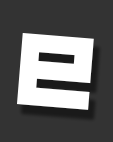
<style>
.page{position:relative;width:113px;height:142px;background:#333333}
.page>*{position:absolute;margin:0}
.t1{font:182.5px "tama-mini02";color:#ffffff}
</style>
<div class="page">
<p class="t1" style="left:17px;top:33px;width:77px;height:77px;rotate:5deg">e</p>
</div>
